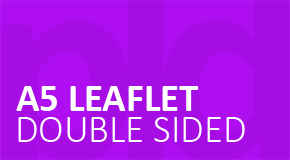
<style>
.page{position:relative;width:290px;height:160px;background:#a50de4}
.page>*{position:absolute;margin:0}
.t1{font:38.8px "Calibri-Bold";color:#ffffff}
.t2{font:38.8px "Calibri-Light";color:#ffffff}
</style>
<div class="page">
<p class="t1" style="left:16px;top:86px;width:183px;height:25px">A5 LEAFLET</p>
<p class="t2" style="left:18px;top:117px;width:227px;height:25px">DOUBLE SIDED</p>
</div>
